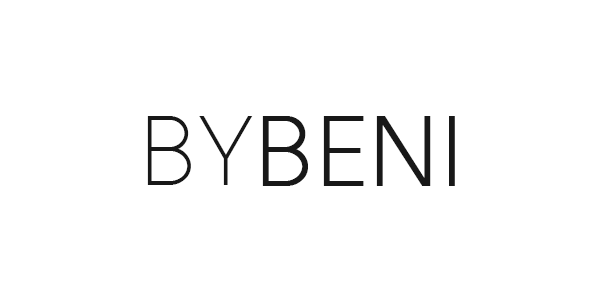
<style>
.page{position:relative;width:600px;height:300px;background:#ffffff}
.page>*{position:absolute;margin:0}
.t1{font:78.9px "BlackLabel-Light";color:#181818;text-transform:uppercase;font-weight:bold}
.t2{font:78.9px "BlackLabel-Light";color:#181818;text-transform:uppercase}
</style>
<div class="page">
<p class="t1" style="left:147px;top:116px;width:308px;height:70px"><span class="t2">BY</span>BENI</p>
</div>
